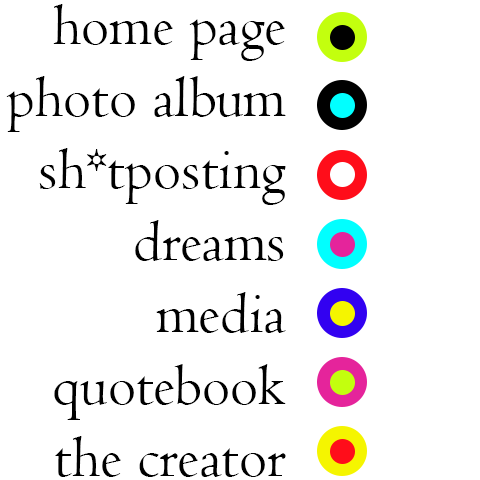
<style>
.page{position:relative;width:480px;height:480px;background:#ffffff}
.page>*{position:absolute;margin:0}
.t1{font:60px "Centaur";color:#000000}
</style>
<div class="page">
<p class="t1" style="left:6px;top:4px;width:280px;height:473px;text-align:right">home page<br>photo album<br>sh*tposting<br>dreams<br>media<br>quotebook<br>the creator</p>
</div>
